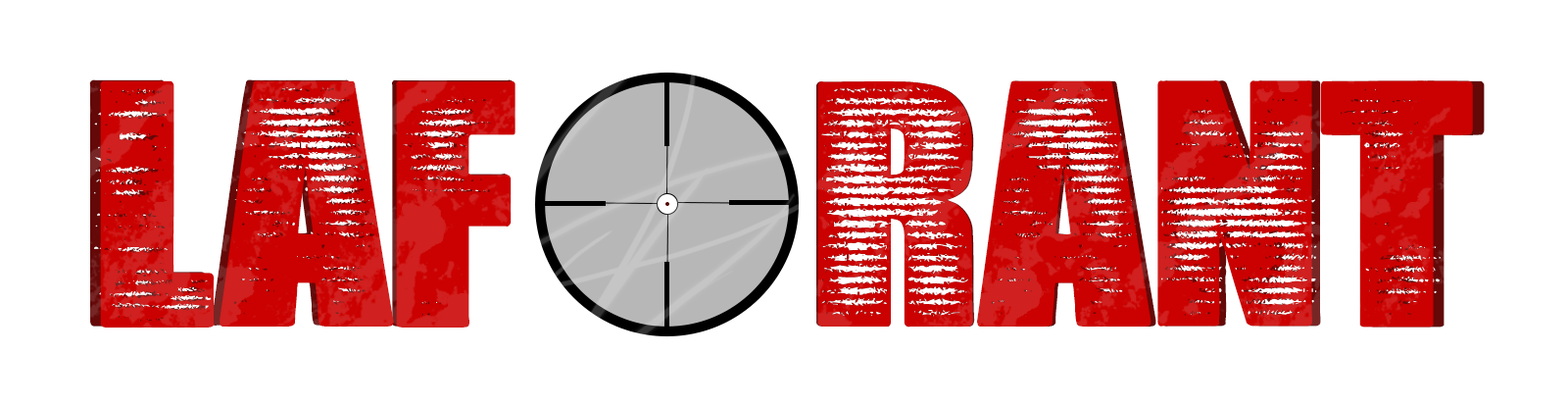
<style>
.page{position:relative;width:1568px;height:405px;background:#ffffff}
.page>*{position:absolute;margin:0}
.t1{font:329.1px "SeedyMotelDEMO";scale:1.09 1}
.t2{font:329.1px "SeedyMotelDEMO";color:#ca0100;scale:1.07 1}
</style>
<div class="page">
<p class="t1" style="left:89px;top:79px;width:425px;height:247px">LAF</p>
<p class="t2" style="left:100px;top:80px;width:415px;height:247px">LAF</p>
<p class="t1" style="left:816px;top:80px;width:669px;height:247px">RANT</p>
<p class="t2" style="left:817px;top:80px;width:656px;height:247px">RANT</p>
</div>
